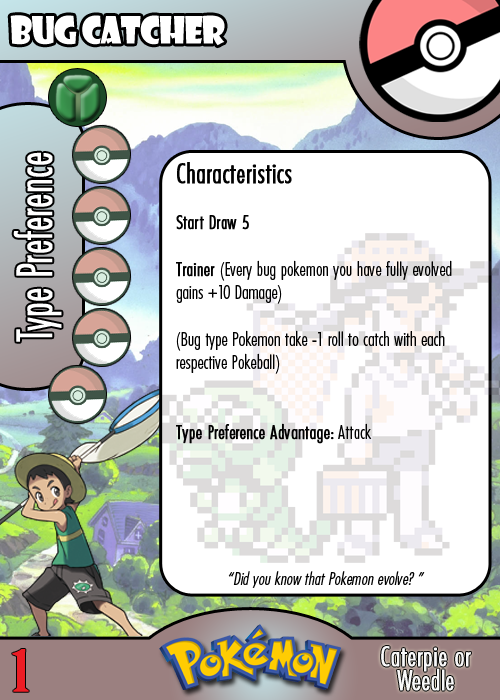
<style>
.page{position:relative;width:500px;height:700px;background:#ffffff}
.page>*{position:absolute;margin:0}
.t1{font:36.7px "ShowcardGothic-Reg";letter-spacing:-0.025em;color:#ffffff;scale:0.91 1}
.t2{font:46.7px "Futura-CondensedLight";color:#ffffff;font-weight:bold;scale:0.83 1}
.t3{font:19.4px "FuturaCondensedBQ-Light";color:#010101}
.t4{font:27.8px "FuturaCondensedBQ-Light";color:#010101;font-weight:bold}
.t5{font:19.4px "FuturaCondensedBQ-Light";color:#010101;font-weight:bold}
.t6{font:18.1px "FuturaCondensedBQ-Light";color:#010101;font-style:italic}
.t7{font:55.6px "BirchStd";color:#ed1c24;font-weight:bold;scale:1.5 1}
.t8{font:27.8px "FuturaCondensedBQ-Light";color:#f9f9f9;font-weight:bold}
</style>
<div class="page">
<p class="t1" style="left:10px;top:15px;width:215px;height:31px">Bug Catcher</p>
<p class="t2" style="left:13px;top:152px;width:49px;height:190px;rotate:-90deg">Type Preference</p>
<p class="t3" style="left:176px;top:162px;width:276px;height:282px"><span class="t4">Characteristics<br></span><span class="t5"><br>Start Draw 5<br><br>Trainer </span>(Every bug pokemon you have fully evolved gains +10 Damage)<br><br>(Bug type Pokemon take -1 roll to catch with each respective Pokeball)<br><br><br><span class="t5">Type Preference Advantage:</span> Attack</p>
<p class="t6" style="left:228px;top:571px;width:197px;height:17px">“Did you know that Pokemon evolve? ”</p>
<p class="t7" style="left:12px;top:649px;width:17px;height:43px">1</p>
<p class="t8" style="left:381px;top:646px;width:90px;height:26px">Caterpie or</p>
<p class="t8" style="left:397px;top:668px;width:57px;height:23px">Weedle</p>
</div>
